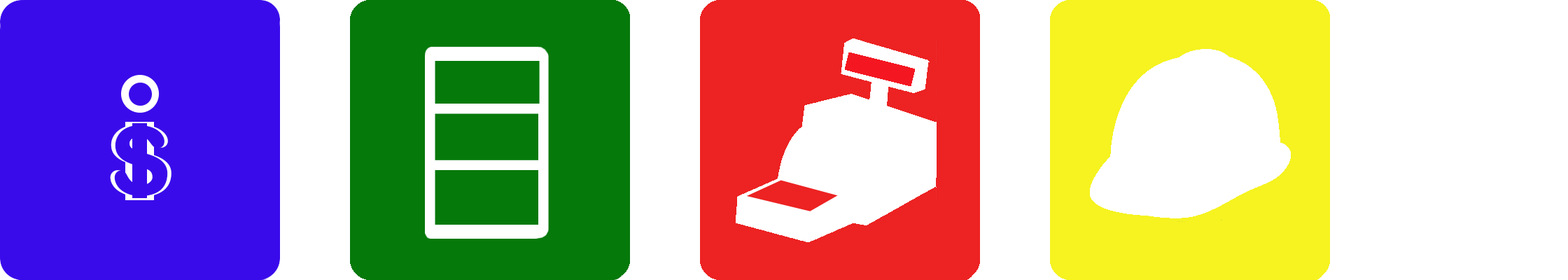
<style>
.page{position:relative;width:1568px;height:280px;background:#ffffff}
.page>*{position:absolute;margin:0}
.t1{font:129.9px "ArialRoundedMTBold";letter-spacing:-0.035em;color:#3a0bea;scale:0.89 1}
</style>
<div class="page">
<p class="t1" style="left:114px;top:125px;width:54px;height:71px">s</p>
</div>
